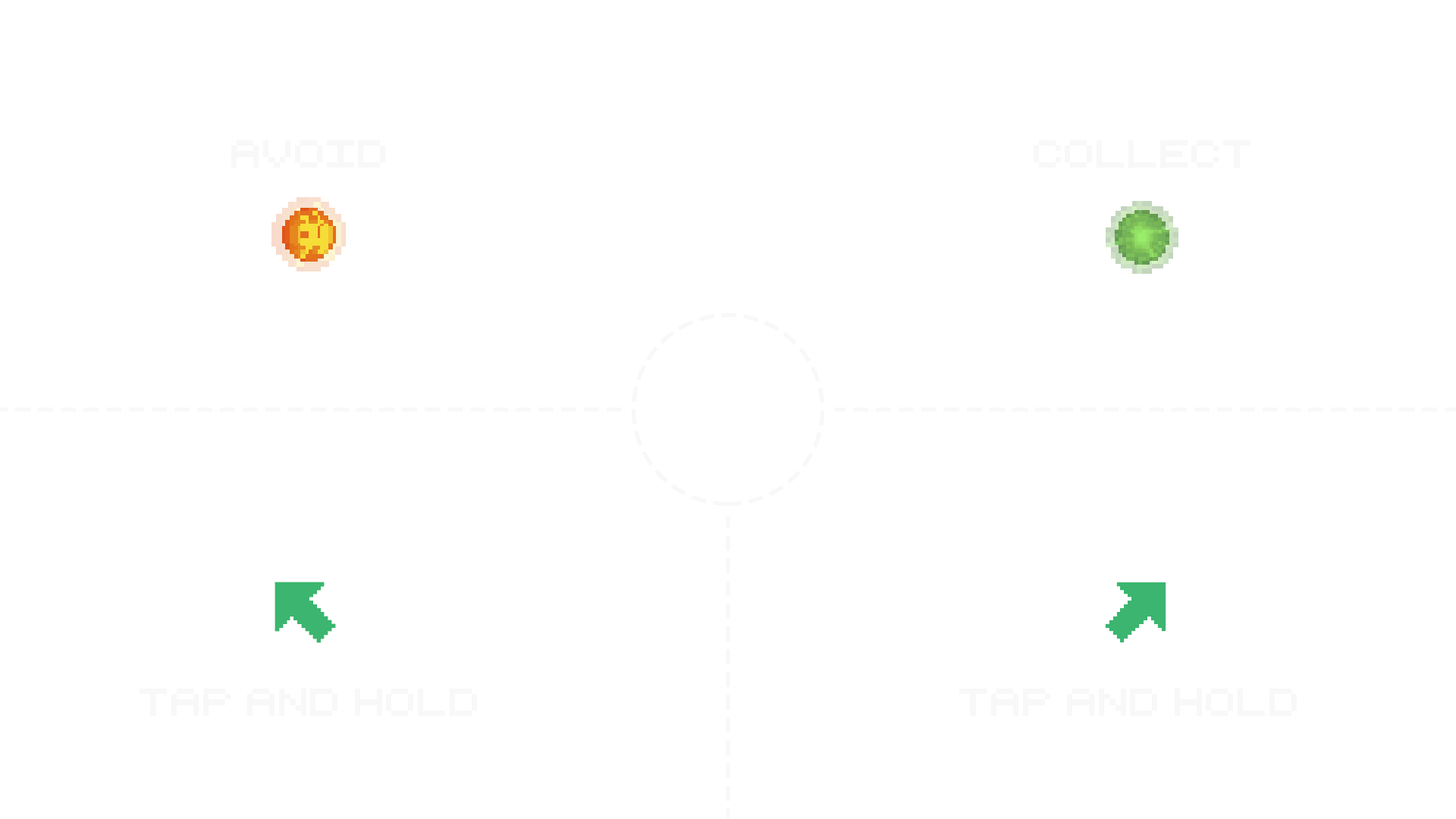
<style>
.page{position:relative;width:1456px;height:819px;background:#ffffff}
.page>*{position:absolute;margin:0}
.t1{font:37.9px "RetroComputer";letter-spacing:-0.01em;color:#f8f8f8}
</style>
<div class="page">
<p class="t1" style="left:231px;top:140px;width:154px;height:28px">Avoid</p>
<p class="t1" style="left:1034px;top:140px;width:216px;height:28px">Collect</p>
<p class="t1" style="left:140px;top:689px;width:337px;height:27px">Tap and Hold</p>
<p class="t1" style="left:959px;top:689px;width:338px;height:27px">Tap and Hold</p>
</div>
